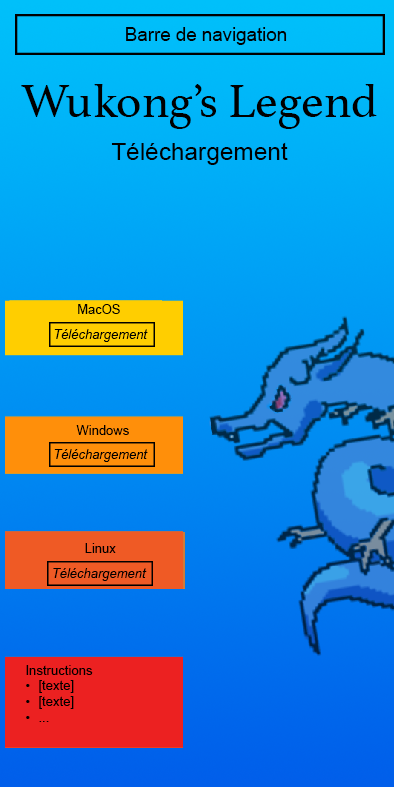
<style>
.page{position:relative;width:394px;height:787px}
.page>*{position:absolute;margin:0}
.t1{font:18.7px "ArialMT";color:#000000}
.t2{font:48.8px/42.7px "Athelas-Regular";color:#000000}
.t3{font:24.4px/42.7px "ArialMT";color:#000000}
.t4{font:12.9px "ArialMT";color:#000000}
.t5{font:12.9px "Arial-ItalicMT";color:#000000}
.t6{font:13.1px "ArialMT";color:#000000}
</style>
<div class="page">
<p class="t1" style="left:126px;top:27px;width:161px;height:18px">Barre de navigation</p>
<p class="t2" style="left:21px;top:84px;width:356px;height:81px;text-align:center">Wukong’s Legend<br><span class="t3">Téléchargement</span></p>
<p class="t4" style="left:78px;top:304px;width:42px;height:10px">MacOS</p>
<p class="t5" style="left:54px;top:329px;width:94px;height:13px">Téléchargement</p>
<p class="t4" style="left:76px;top:425px;width:53px;height:10px">Windows</p>
<p class="t5" style="left:54px;top:449px;width:94px;height:13px">Téléchargement</p>
<p class="t4" style="left:85px;top:543px;width:31px;height:10px">Linux</p>
<p class="t5" style="left:53px;top:568px;width:94px;height:13px">Téléchargement</p>
<p class="t6" style="left:26px;top:665px;width:67px;height:57px">Instructions<br>[texte]<br>[texte]<br>...</p>
</div>
